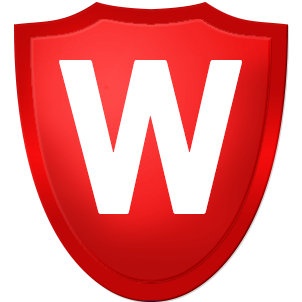
<style>
.page{position:relative;width:302px;height:302px;background:#ffffff}
.page>*{position:absolute;margin:0}
.t1{font:220px "Barlow-Bold";color:#ffffff}
</style>
<div class="page">
<p class="t1" style="left:59px;top:60px;width:183px;height:154px">W</p>
</div>
